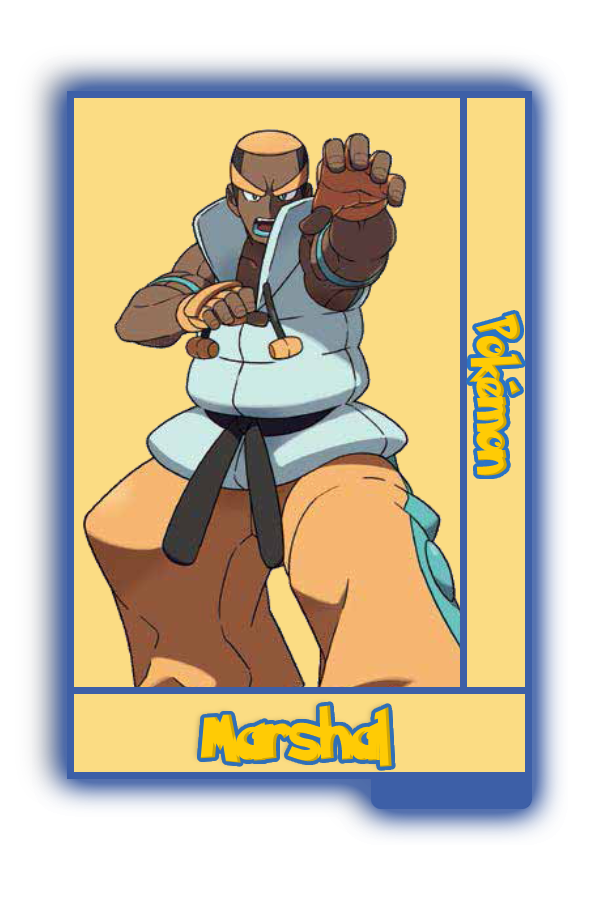
<style>
.page{position:relative;width:600px;height:900px;background:#fbdc83}
.page>*{position:absolute;margin:0}
.t1{font:48.8px "PokemonSolidNormal";color:#ffcb05;scale:0.8 1}
.t2{font:56.6px "PokemonSolidNormal";color:#ffcb05;scale:0.92 1}
</style>
<div class="page">
<p class="t1" style="left:469px;top:313px;width:54px;height:163px;rotate:90deg">Pokémon</p>
<p class="t2" style="left:200px;top:705px;width:192px;height:62px">Marshal</p>
</div>
